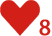
<style>
.page{position:relative;width:52px;height:36px;background:#d22018}
.page>*{position:absolute;margin:0}
.t1{font:23.4px "MyriadPro-Regular";letter-spacing:-0.1em;color:#d22018;font-weight:bold}
</style>
<div class="page">
<p class="t1" style="left:39px;top:19px;width:12px;height:17px">8</p>
</div>
